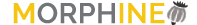
<style>
.page{position:relative;width:197px;height:25px;background:#ffffff}
.page>*{position:absolute;margin:0}
.t1{font:28px "Raleway-SemiBold";color:#717578;font-weight:bold}
.t2{font:28px "Raleway-SemiBold";color:#f4c613;font-weight:bold}
</style>
<div class="page">
<p class="t1" style="left:13px;top:2px;width:152px;height:22px"><span class="t2">M</span>ORPH<span class="t2">INE</span></p>
</div>
